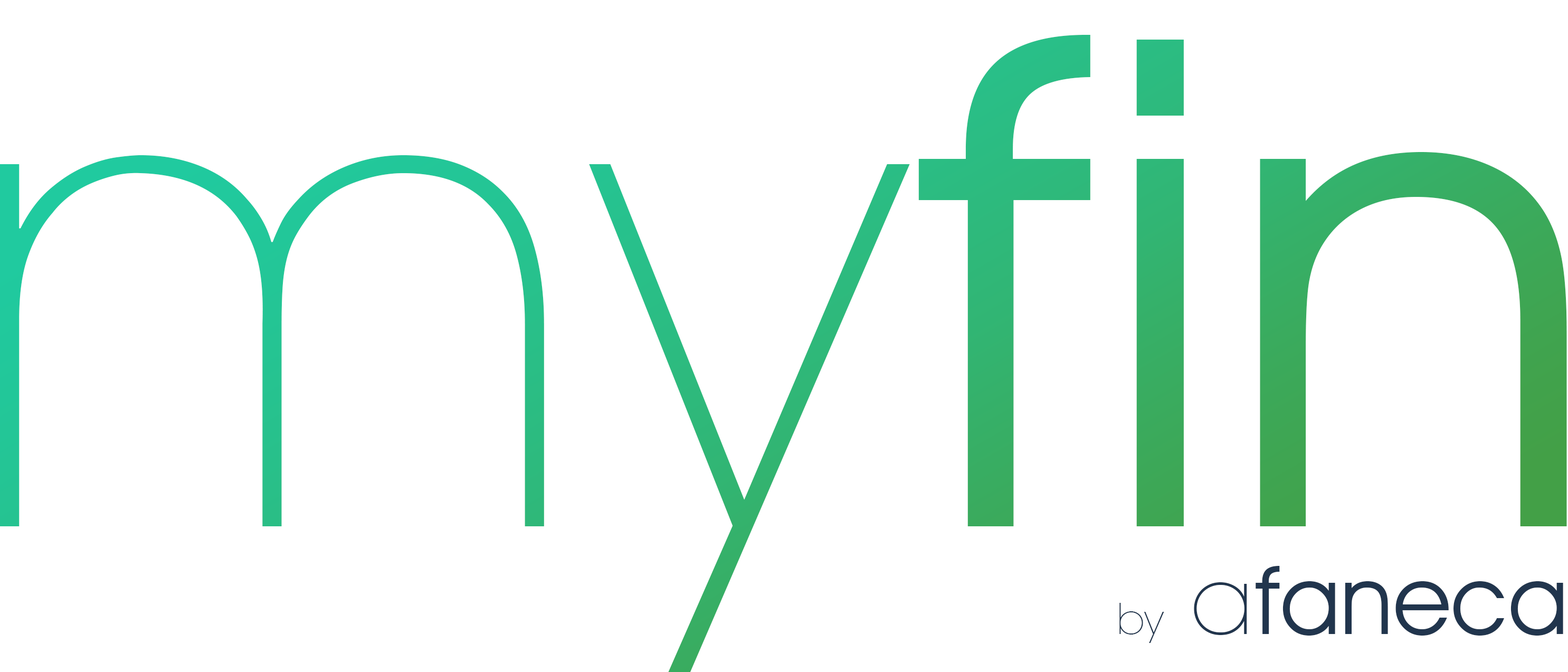
<style>
.page{position:relative;width:1568px;height:672px;background:#ffffff}
.page>*{position:absolute;margin:0}
.t1{font:683.5px "AvantGardeITCbyBT-Book"}
.t2{font:683.5px "AvantGardeLT-ExtraLight"}
.t3{font:95px "AvantGardeITCbyBT-Book";color:#21354d}
.t4{font:42.2px "AvantGardeLT-ExtraLight";color:#21354d}
.t5{font:95px "AvantGardeLT-ExtraLight";color:#21354d}
</style>
<div class="page">
<p class="t1" style="left:0px;top:35px;width:1567px;height:637px"><span class="t2">my</span>fin</p>
<p class="t3" style="left:1119px;top:566px;width:444px;height:77px"><span class="t4">by</span><span class="t5"> a</span>faneca</p>
</div>
